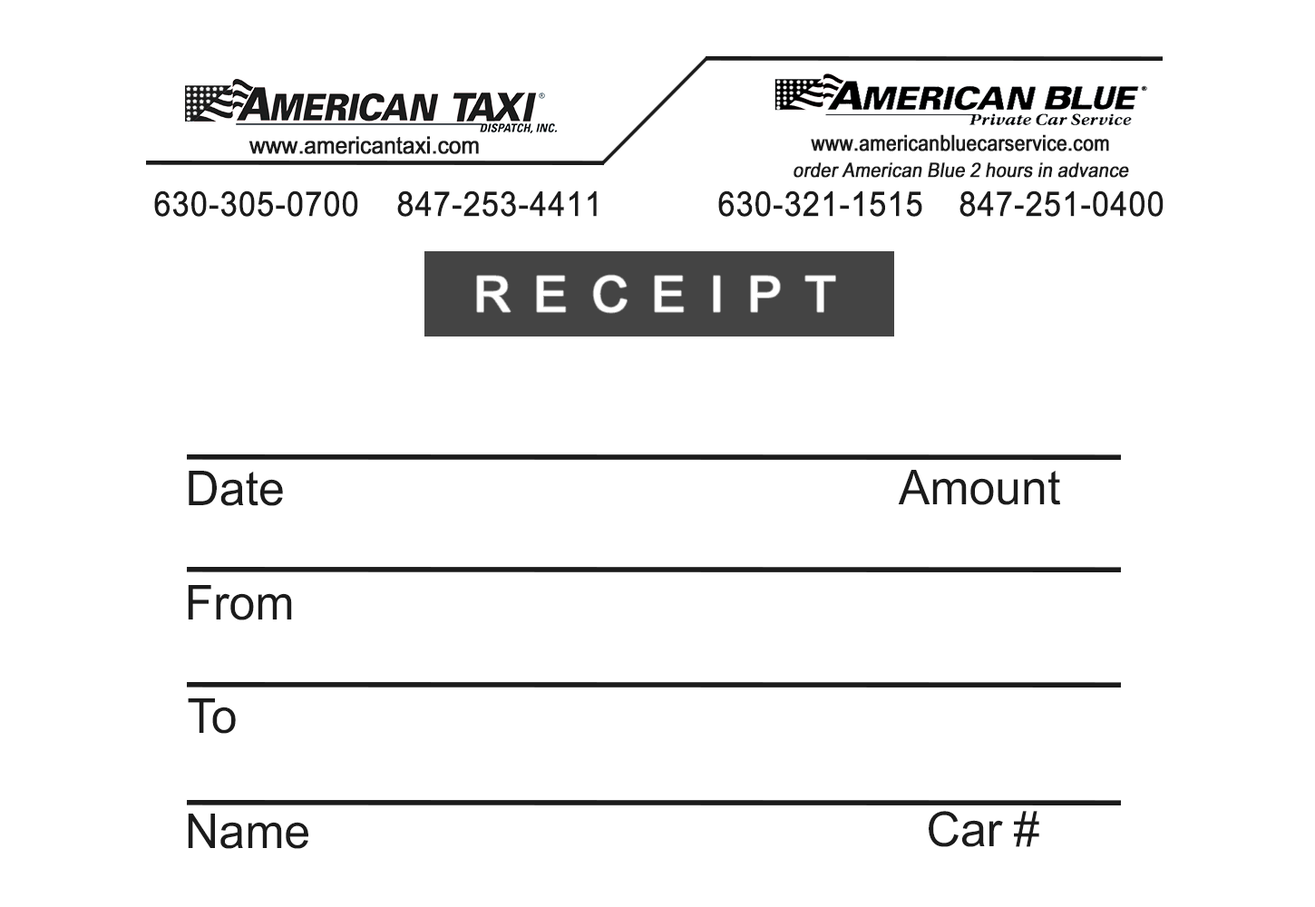
<style>
.page{position:relative;width:1315px;height:907px;background:#ffffff}
.page>*{position:absolute;margin:0}
.t1{font:23.6px "AksharUnicode";letter-spacing:-0.02em;color:#1b1b1b;font-weight:bold;scale:0.94 1}
.t2{font:19.8px "AksharUnicode";color:#1b1b1b;font-weight:bold;font-style:italic;scale:0.9 1}
.t3{font:34px "AksharUnicode";letter-spacing:0.01em;color:#1b1b1b;font-weight:bold;scale:0.91 1}
.t4{font:49px "AksharUnicode";letter-spacing:0.46em;color:#ffffff;font-weight:bold}
.t5{font:48.2px "AksharUnicode";color:#1b1b1b}
.t6{font:48.2px "AksharUnicode";letter-spacing:-0.1em;color:#1b1b1b}
</style>
<div class="page">
<p class="t1" style="left:248px;top:136px;width:231px;height:18px">www.americantaxi.com</p>
<p class="t2" style="left:793px;top:162px;width:336px;height:16px">order American Blue 2 hours in advance</p>
<p class="t3" style="left:154px;top:190px;width:204px;height:27px">630-305-0700</p>
<p class="t3" style="left:397px;top:190px;width:200px;height:27px">847-253-4411</p>
<p class="t3" style="left:718px;top:190px;width:204px;height:27px">630-321-1515</p>
<p class="t3" style="left:959px;top:190px;width:204px;height:27px">847-251-0400</p>
<p class="t4" style="left:477px;top:275px;width:358px;height:38px">RECEIPT</p>
<p class="t5" style="left:189px;top:471px;width:94px;height:35px">Date</p>
<p class="t5" style="left:898px;top:470px;width:162px;height:35px">Amount</p>
<p class="t5" style="left:188px;top:585px;width:104px;height:35px">From</p>
<p class="t6" style="left:188px;top:698px;width:48px;height:36px">To</p>
<p class="t5" style="left:188px;top:813px;width:120px;height:36px">Name</p>
<p class="t5" style="left:929px;top:811px;width:110px;height:36px">Car #</p>
</div>
